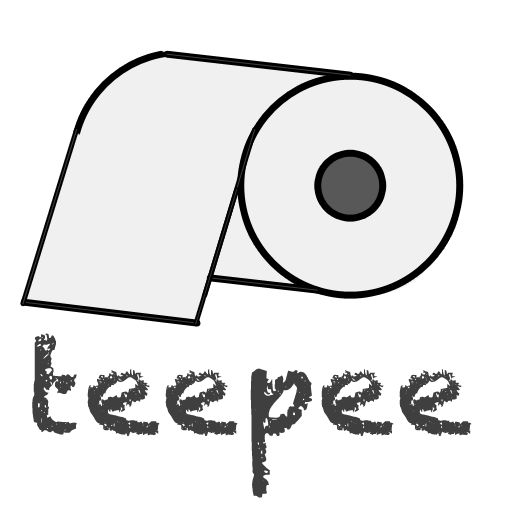
<style>
.page{position:relative;width:520px;height:520px;background:#ffffff}
.page>*{position:absolute;margin:0}
.t1{font:121px "Chalkduster";letter-spacing:0.025em;color:#3f3f3f}
</style>
<div class="page">
<p class="t1" style="left:32px;top:333px;width:440px;height:165px">teepee</p>
</div>
